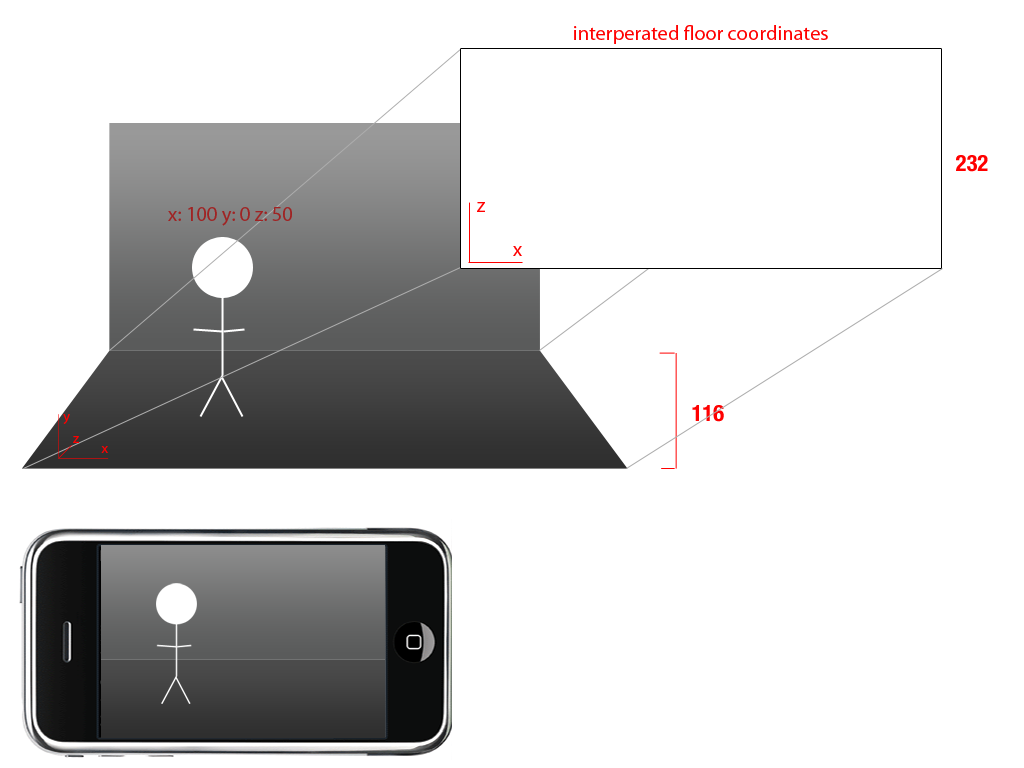
<style>
.page{position:relative;width:1024px;height:768px;background:#ffffff}
.page>*{position:absolute;margin:0}
.t1{font:20.4px "MyriadPro-Regular";color:#fe0000}
.t2{font:22.6px "HelveticaNeue-CondensedBold";color:#ff0000}
.t3{font:20.4px "MyriadPro-Regular";color:#a02323}
.t4{font:20.4px "MyriadPro-Regular";color:#ff0000}
.t5{font:14.2px "MyriadPro-Regular";color:#ff0000}
.t6{font:14.2px "MyriadPro-Regular";color:#fe0000}
</style>
<div class="page">
<p class="t1" style="left:574px;top:25px;width:254px;height:19px">interperated floor coordinates</p>
<p class="t2" style="left:956px;top:155px;width:32px;height:17px">232</p>
<p class="t3" style="left:168px;top:207px;width:124px;height:19px">x: 100 y: 0 z: 50</p>
<p class="t4" style="left:477px;top:202px;width:8px;height:10px">z</p>
<p class="t4" style="left:513px;top:246px;width:9px;height:10px">x</p>
<p class="t5" style="left:63px;top:414px;width:7px;height:10px">y</p>
<p class="t2" style="left:692px;top:405px;width:32px;height:17px">116</p>
<p class="t6" style="left:73px;top:436px;width:6px;height:7px">z</p>
<p class="t5" style="left:101px;top:446px;width:7px;height:7px">x</p>
</div>
